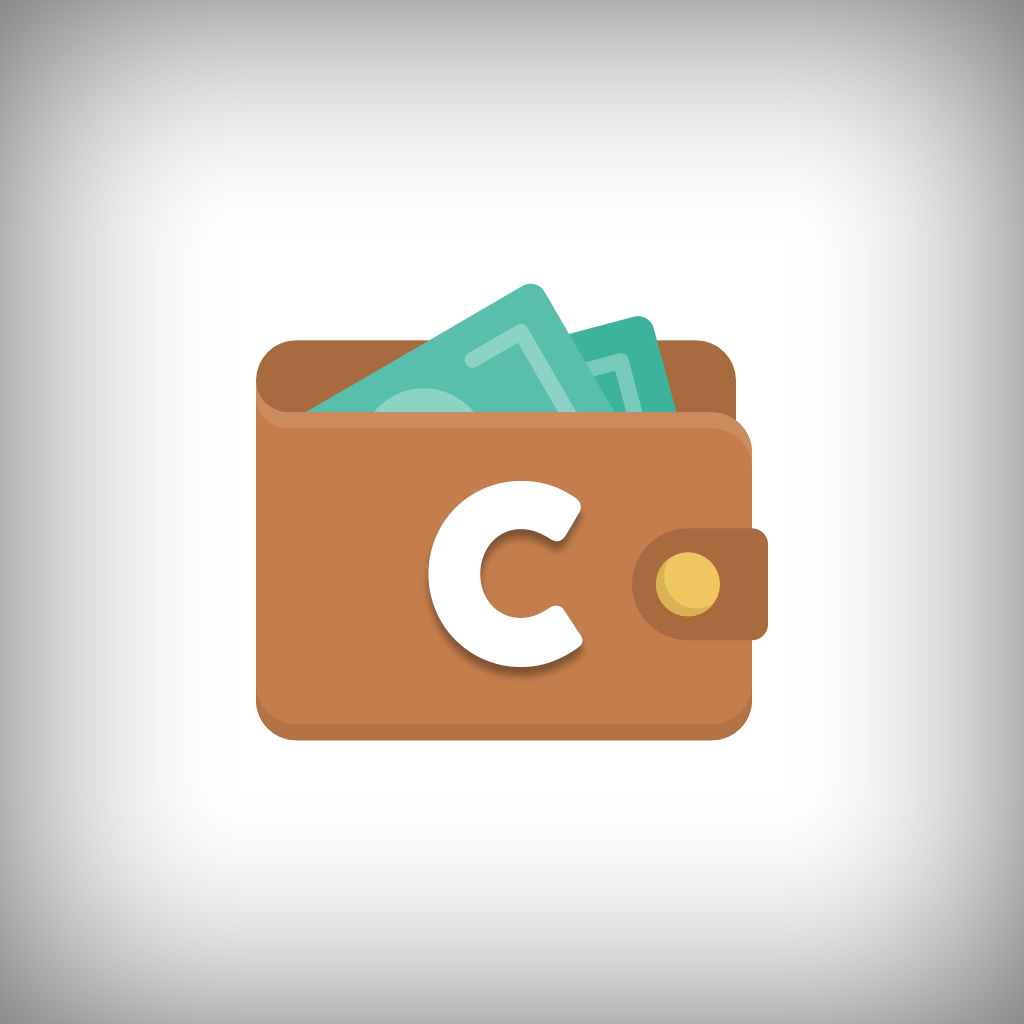
<style>
.page{position:relative;width:1024px;height:1024px}
.page>*{position:absolute;margin:0}
.t1{font:284px "COCOGOOSE";color:#ffffff}
</style>
<div class="page">
<p class="t1" style="left:428px;top:481px;width:155px;height:186px">c</p>
</div>
